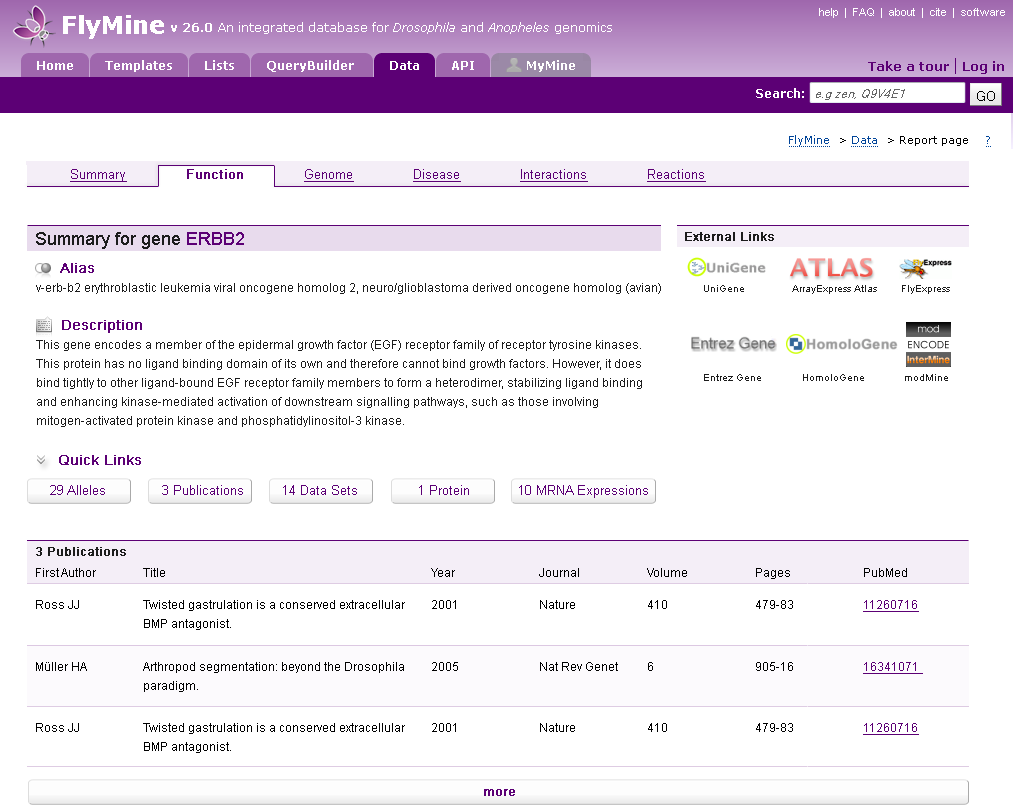
<style>
.page{position:relative;width:1013px;height:807px;background:#ffffff}
.page>*{position:absolute;margin:0}
.t1{font:13px "ArialMT";color:#5c0075;text-decoration:underline}
.t2{font:13px "ArialMT";color:#5c0075;font-weight:bold}
.t3{font:18px "ArialMT";color:#1c1c1c}
.t4{font:18px "ArialMT";color:#5c0075}
.t5{font:12px "ArialMT";color:#1c1c1c;font-weight:bold}
.t6{font:12px/19px "ArialMT";color:#1c1c1c}
.t7{font:14px/19px "ArialMT";color:#5c0075;font-weight:bold}
.t8{font:10px "ArialMT";color:#1c1c1c}
.t9{font:14px "ArialMT";color:#5c0075;font-weight:bold}
.t10{font:13px "ArialMT";color:#5c0075}
.t11{font:12px "ArialMT";color:#000000}
.t12{font:12px/19px "ArialMT";color:#000000}
.t13{font:12px/19px "ArialMT";color:#5c0075;text-decoration:underline}
.t14{font:12px "ArialMT";color:#5c0075;font-weight:bold}
</style>
<div class="page">
<p class="t1" style="left:70px;top:169px;width:636px;height:13px">Summary               <span class="t2">Function               </span>Genome               Disease               Interactions               Reactions</p>
<p class="t3" style="left:36px;top:232px;width:208px;height:17px">Summary for gene <span class="t4">ERBB2</span></p>
<p class="t5" style="left:685px;top:232px;width:89px;height:9px">External Links</p>
<p class="t6" style="left:36px;top:263px;width:625px;height:31px"><span class="t7">     Alias<br></span>v-erb-b2 erythroblastic leukemia viral oncogene homolog 2, neuro/glioblastoma derived oncogene homolog (avian)</p>
<p class="t8" style="left:704px;top:285px;width:246px;height:9px">UniGene               ArrayExpress Atlas        FlyExpress</p>
<p class="t6" style="left:36px;top:320px;width:606px;height:107px"><span class="t7">     Description</span><br>This gene encodes a member of the epidermal growth factor (EGF) receptor family of receptor tyrosine kinases. <br>This protein has no ligand binding domain of its own and therefore cannot bind growth factors. However, it does<br>bind tightly to other ligand-bound EGF receptor family members to form a heterodimer, stabilizing ligand binding<br>and enhancing kinase-mediated activation of downstream signalling pathways, such as those involving<br>mitogen-activated protein kinase and phosphatidylinositol-3 kinase.</p>
<p class="t8" style="left:704px;top:374px;width:244px;height:7px">Entrez Gene      HomoloGene             modMine</p>
<p class="t9" style="left:59px;top:455px;width:82px;height:10px">Quick Links</p>
<p class="t10" style="left:50px;top:485px;width:598px;height:13px">29 Alleles      3 Publications          14 Data Sets               1 Protein    10 MRNA Expressions</p>
<p class="t5" style="left:36px;top:547px;width:90px;height:9px">3 Publications</p>
<p class="t11" style="left:36px;top:568px;width:871px;height:11px">First Author  Title        Year   Journal  Volume  Pages  PubMed</p>
<p class="t12" style="left:36px;top:600px;width:883px;height:30px">Ross JJ  Twisted gastrulation is a conserved extracellular 2001   Nature  410   479-83  <span class="t13">11260716<br></span>   BMP antagonist.</p>
<p class="t12" style="left:36px;top:662px;width:887px;height:30px">Müller HA  Arthropod segmentation: beyond the Drosophila 2005   Nat Rev Genet 6   905-16  <span class="t13">16341071 </span><br>   paradigm.</p>
<p class="t12" style="left:36px;top:723px;width:883px;height:30px">Ross JJ  Twisted gastrulation is a conserved extracellular 2001   Nature  410   479-83  <span class="t13">11260716<br></span>   BMP antagonist.</p>
<p class="t14" style="left:484px;top:789px;width:31px;height:7px">more</p>
</div>
